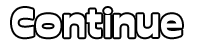
<style>
.page{position:relative;width:200px;height:52px;background:#ffffff}
.page>*{position:absolute;margin:0}
.t1{font:40px "Glockenspiel";color:#ffffff}
</style>
<div class="page">
<p class="t1" style="left:12px;top:8px;width:170px;height:30px">Continue</p>
</div>
